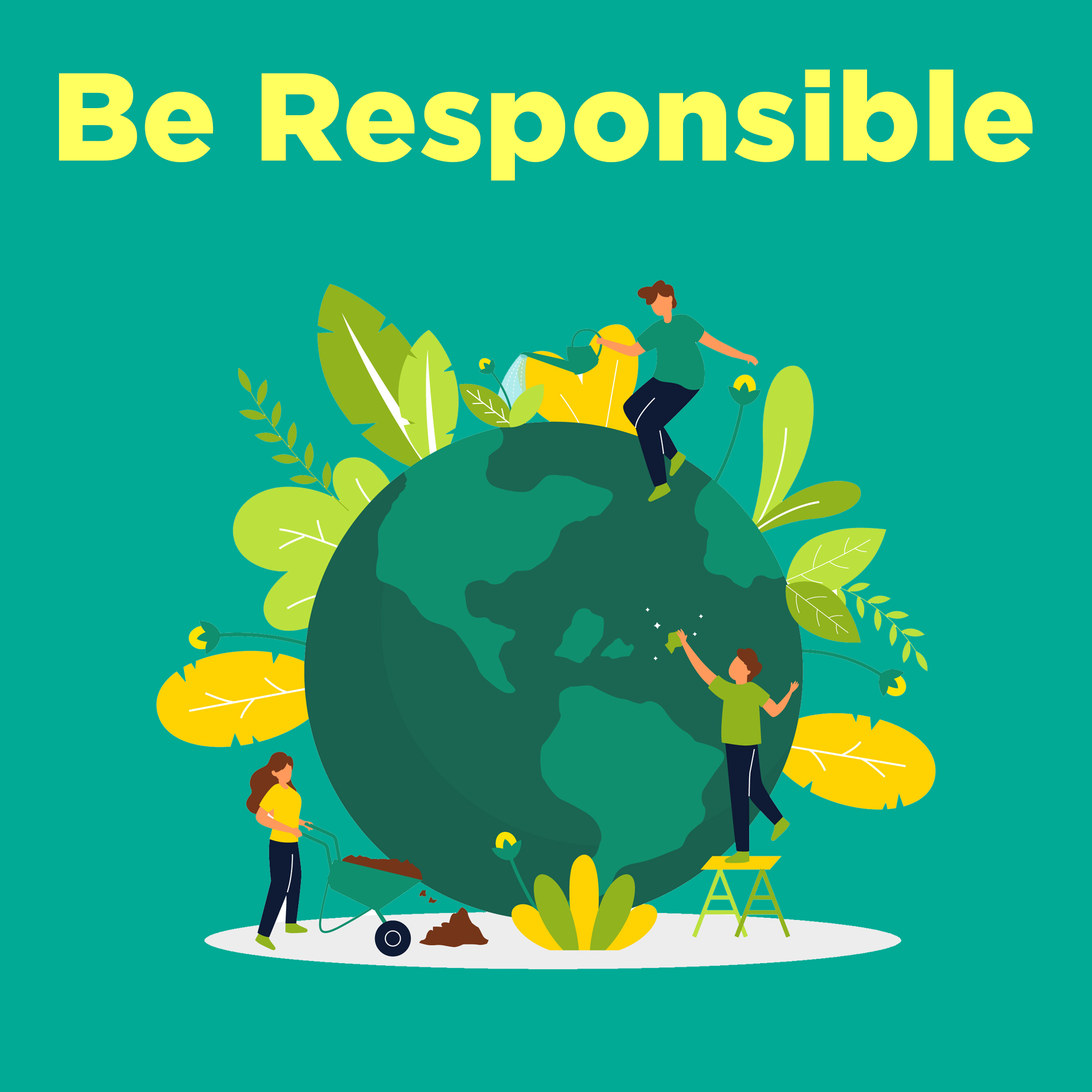
<style>
.page{position:relative;width:1092px;height:1092px;background:#00aa95}
.page>*{position:absolute;margin:0}
.t1{font:124.5px "Gotham-Black";letter-spacing:0.01em;color:#ffff5f}
</style>
<div class="page">
<p class="t1" style="left:59px;top:69px;width:974px;height:112px">Be Responsible</p>
</div>
